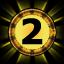
<style>
.page{position:relative;width:64px;height:64px}
.page>*{position:absolute;margin:0}
.t1{font:34.7px "Verdana-Bold";color:#000000}
</style>
<div class="page">
<p class="t1" style="left:22px;top:18px;width:21px;height:27px">2</p>
</div>
